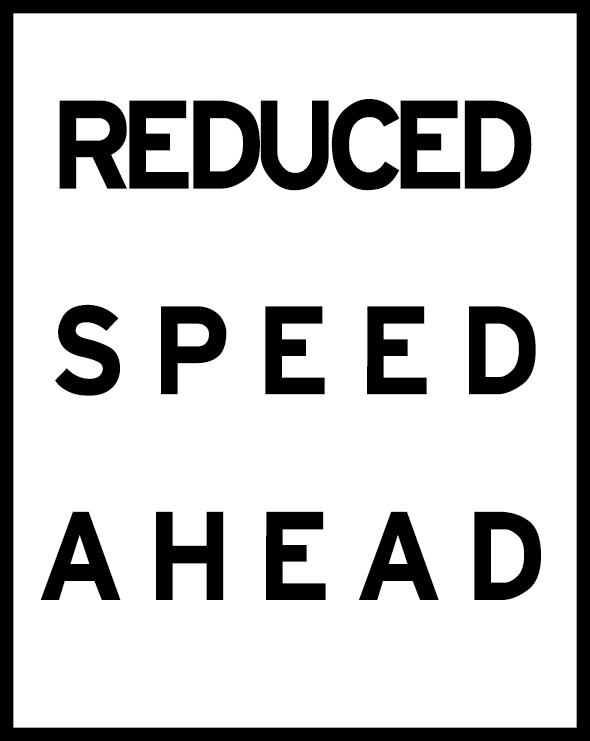
<style>
.page{position:relative;width:590px;height:741px;background:#ffffff}
.page>*{position:absolute;margin:0}
.t1{font:133.3px/205.7px "HittheRoad";letter-spacing:0.2em;color:#000000;scale:0.95 1}
.t2{font:133.3px/205.7px "HittheRoad";letter-spacing:-0.1em;color:#000000;scale:0.95 1}
</style>
<div class="page">
<p class="t1" style="left:40px;top:99px;width:501px;height:501px;text-align:center"><span class="t2">REDUCED<br></span>SPEED<br>AHEAD</p>
</div>
